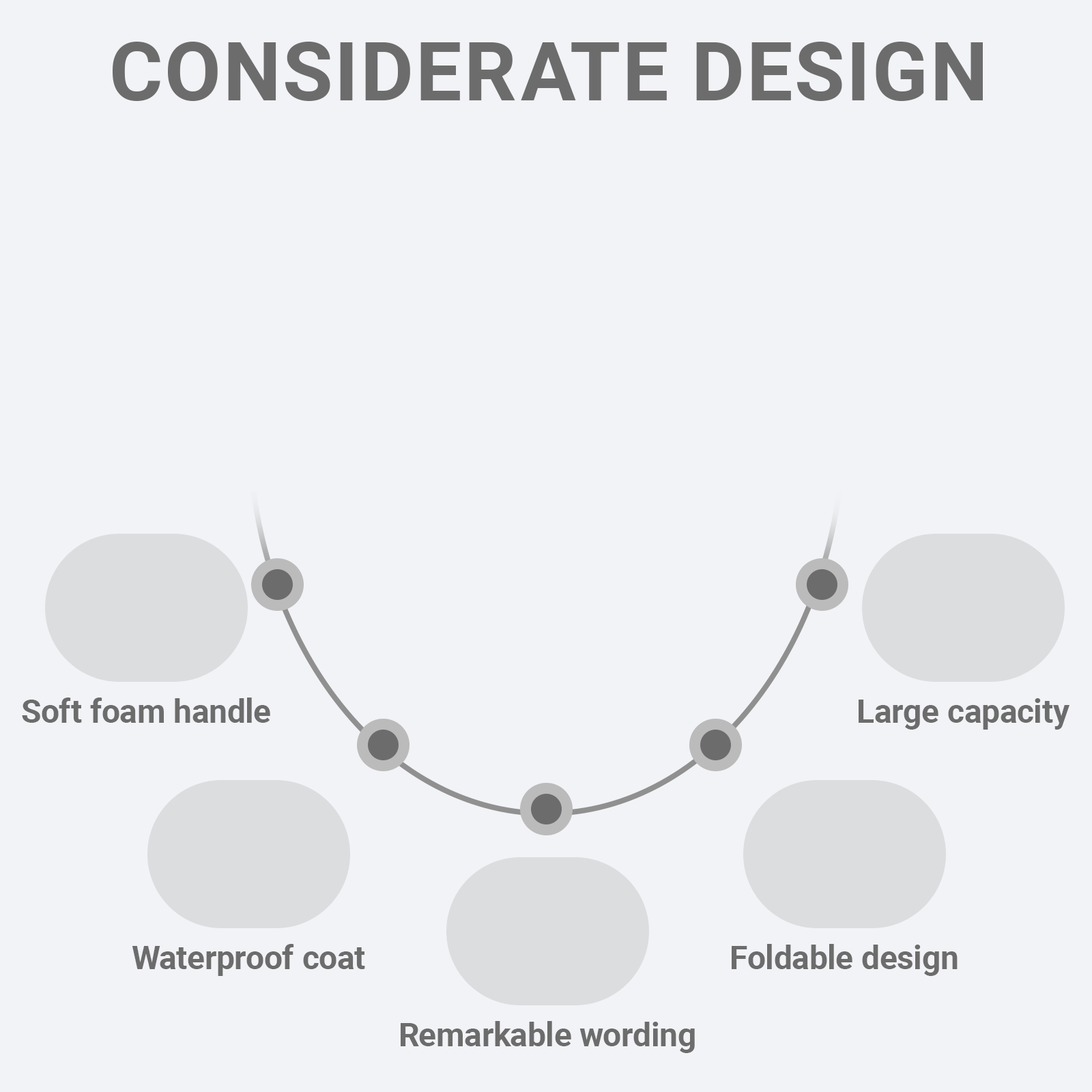
<style>
.page{position:relative;width:1092px;height:1092px;background:#f2f3f6}
.page>*{position:absolute;margin:0}
.t1{font:81.9px "Roboto-Bold";color:#6c6c6c;text-transform:uppercase}
.t2{font:32.8px "Roboto-Bold";color:#6c6c6c}
</style>
<div class="page">
<p class="t1" style="left:113px;top:42px;width:870px;height:59px">Considerate design</p>
<p class="t2" style="left:22px;top:698px;width:248px;height:25px">Soft foam handle</p>
<p class="t2" style="left:859px;top:698px;width:210px;height:32px">Large capacity</p>
<p class="t2" style="left:132px;top:944px;width:233px;height:32px">Waterproof coat</p>
<p class="t2" style="left:732px;top:944px;width:226px;height:32px">Foldable design</p>
<p class="t2" style="left:401px;top:1021px;width:294px;height:32px">Remarkable wording</p>
</div>
